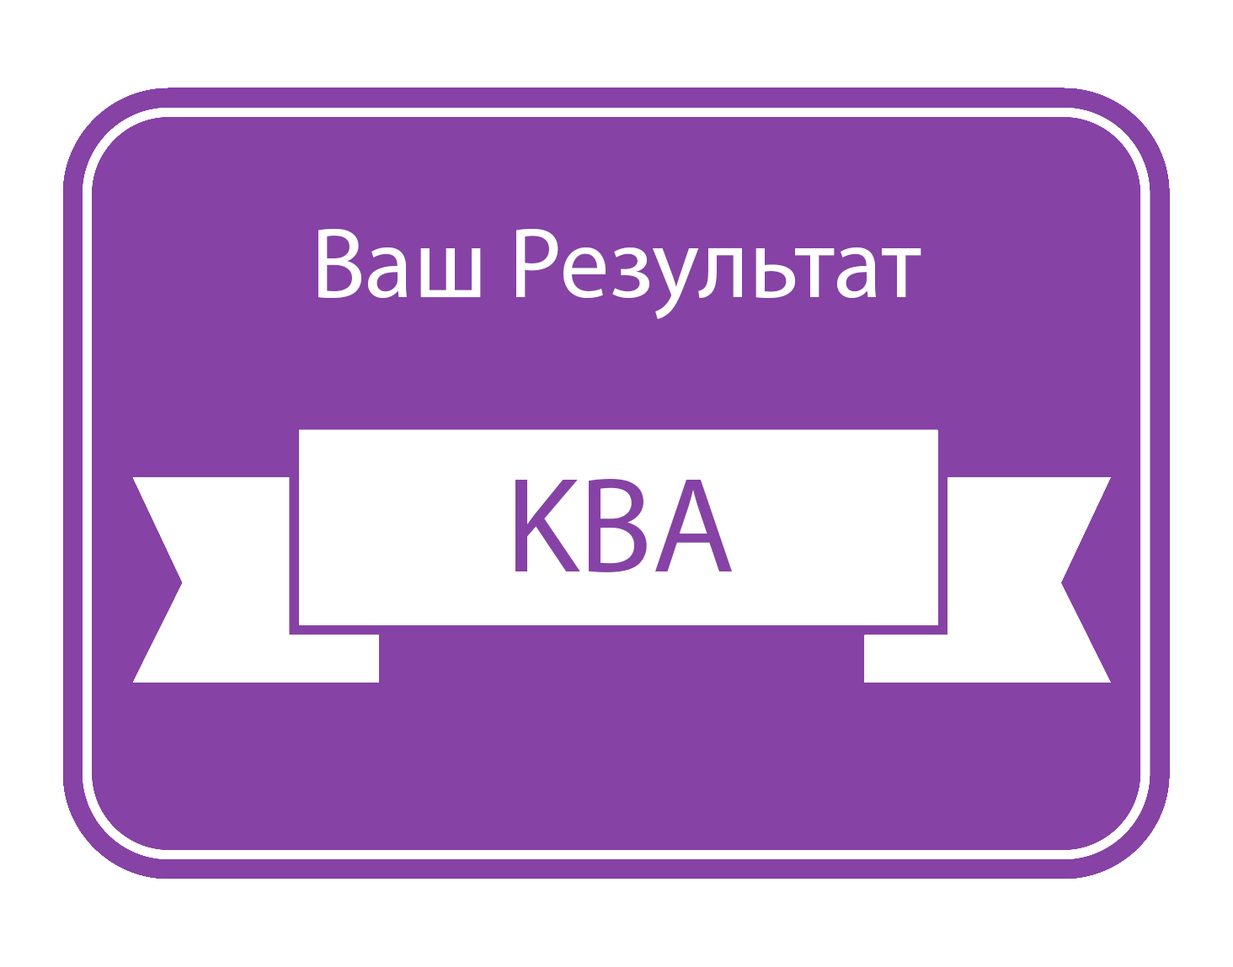
<style>
.page{position:relative;width:1233px;height:967px;background:#8642a5}
.page>*{position:absolute;margin:0}
.t1{font:100.2px "MyriadPro-Regular";color:#ffffff}
.t2{font:135.8px "MyriadPro-Regular";color:#8642a5}
</style>
<div class="page">
<p class="t1" style="left:318px;top:228px;width:603px;height:91px">Ваш Результат</p>
<p class="t2" style="left:515px;top:479px;width:217px;height:94px">KBA</p>
</div>
